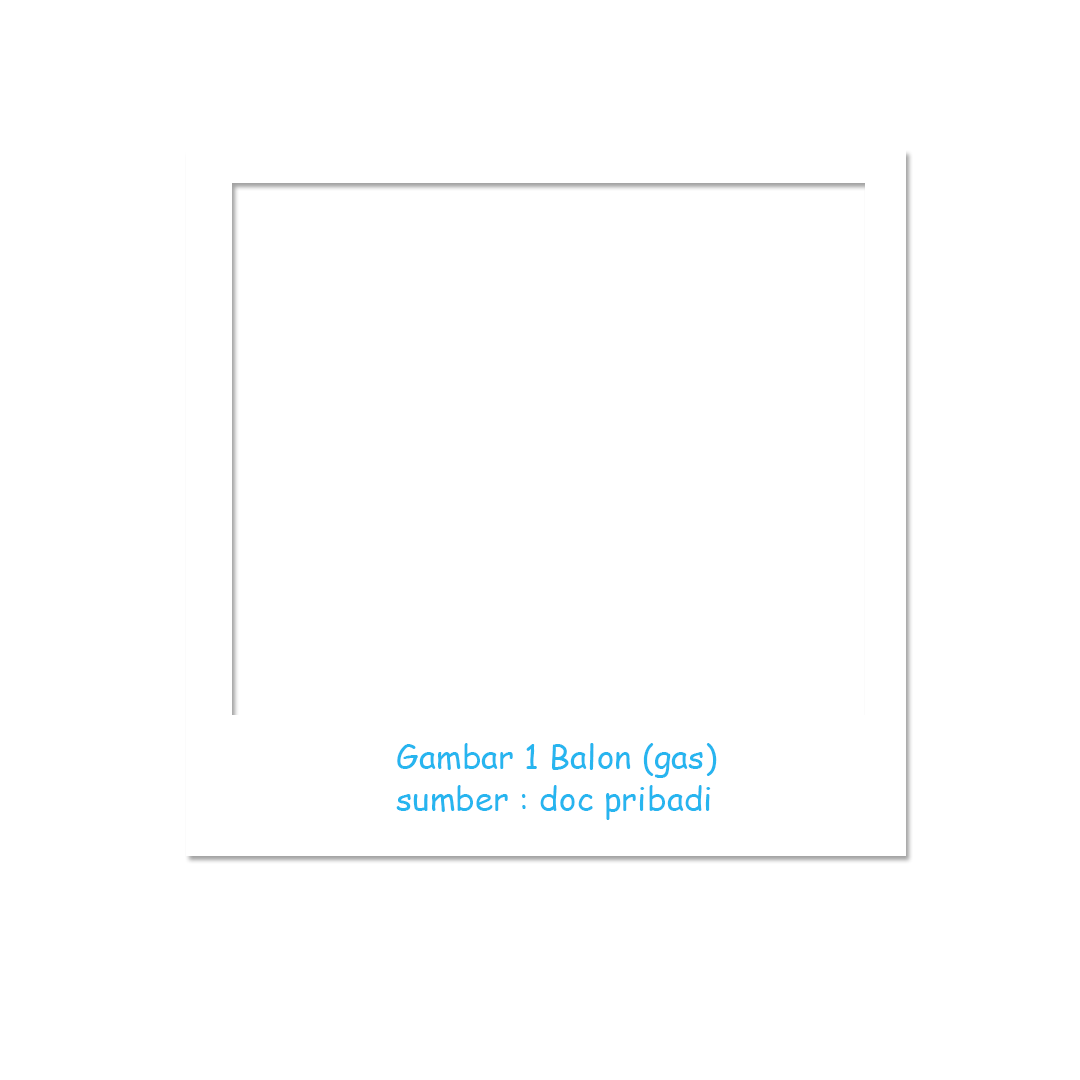
<style>
.page{position:relative;width:1080px;height:1080px;background:#ffffff}
.page>*{position:absolute;margin:0}
.t1{font:33.3px/41.7px "ComicSansMS";color:#27b5ef}
</style>
<div class="page">
<p class="t1" style="left:396px;top:743px;width:321px;height:77px;text-align:justify">Gambar 1 Balon (gas) <br>sumber : doc pribadi</p>
</div>
